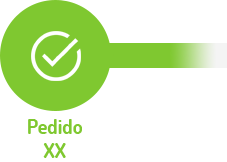
<style>
.page{position:relative;width:227px;height:162px;background:#ffffff}
.page>*{position:absolute;margin:0}
.t1{font:20px/24px "Dosis-Bold";color:#7fc830}
</style>
<div class="page">
<p class="t1" style="left:28px;top:119px;width:54px;height:39px;text-align:center">Pedido<br>XX</p>
</div>
